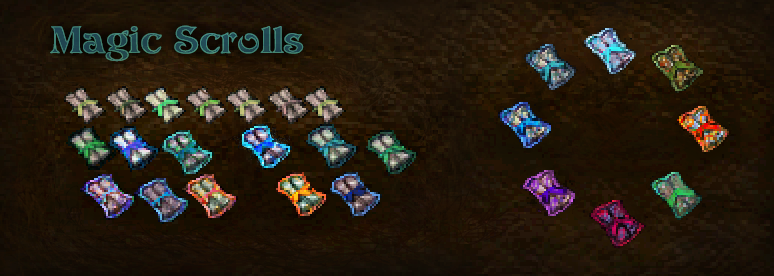
<style>
.page{position:relative;width:774px;height:276px}
.page>*{position:absolute;margin:0}
.t1{font:37.1px "Avatar";scale:1.25 1}
</style>
<div class="page">
<p class="t1" style="left:50px;top:25px;width:254px;height:37px">Magic Scrolls</p>
<p class="t1" style="left:50px;top:25px;width:254px;height:37px">Magic Scrolls</p>
</div>
